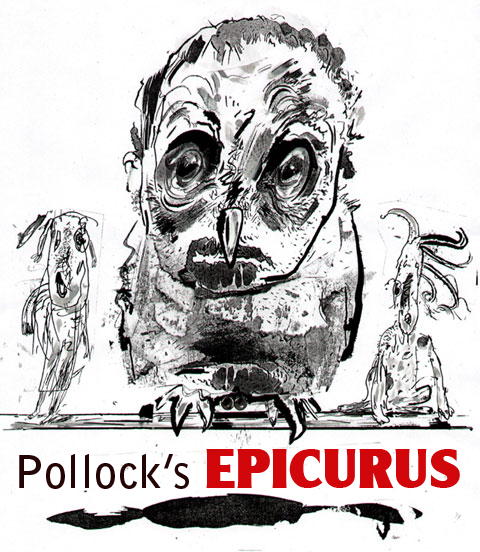
<style>
.page{position:relative;width:480px;height:552px;background:#ffffff}
.page>*{position:absolute;margin:0}
.t1{font:45.4px "BellGothicStd-Bold";letter-spacing:0.02em;color:#230505}
.t2{font:54.4px "AlexanderBecker-Heavy";letter-spacing:0.02em;color:#d1070b}
</style>
<div class="page">
<p class="t1" style="left:19px;top:449px;width:441px;height:40px">Pollock’s <span class="t2">EPICURUS</span></p>
</div>
